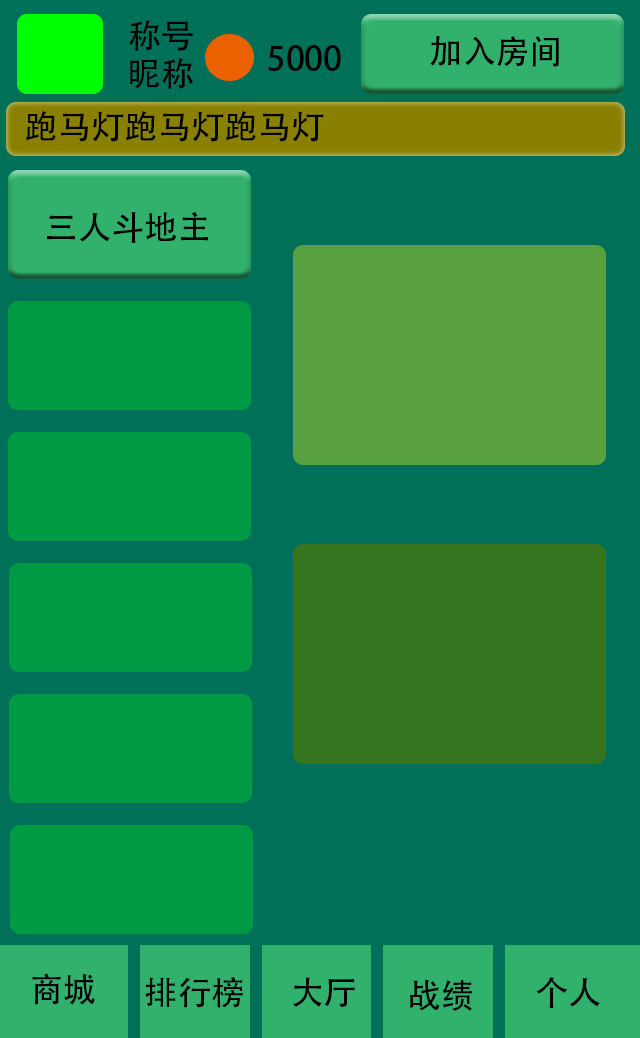
<style>
.page{position:relative;width:640px;height:1038px;background:#007058}
.page>*{position:absolute;margin:0}
.t1{font:33.3px "AdobeHeitiStd-Regular";color:#000000}
</style>
<div class="page">
<p class="t1" style="left:129px;top:20px;width:64px;height:31px">称号</p>
<p class="t1" style="left:430px;top:35px;width:129px;height:32px">加入房间</p>
<p class="t1" style="left:268px;top:45px;width:73px;height:26px">5000</p>
<p class="t1" style="left:130px;top:58px;width:63px;height:31px">昵称</p>
<p class="t1" style="left:26px;top:111px;width:298px;height:31px">跑马灯跑马灯跑马灯</p>
<p class="t1" style="left:47px;top:211px;width:161px;height:32px">三人斗地主</p>
<p class="t1" style="left:32px;top:973px;width:63px;height:32px">商城</p>
<p class="t1" style="left:145px;top:977px;width:98px;height:31px">排行榜</p>
<p class="t1" style="left:293px;top:977px;width:62px;height:30px">大厅</p>
<p class="t1" style="left:536px;top:977px;width:64px;height:31px">个人</p>
<p class="t1" style="left:410px;top:979px;width:63px;height:32px">战绩</p>
</div>
